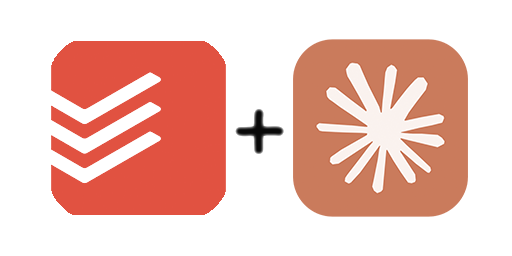
<style>
.page{position:relative;width:512px;height:256px;background:#ffffff}
.page>*{position:absolute;margin:0}
.t1{font:116px "ComicSansMS"}
</style>
<div class="page">
<p class="t1" style="left:235px;top:108px;width:50px;height:47px">+</p>
</div>
